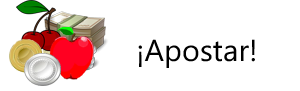
<style>
.page{position:relative;width:300px;height:91px;background:#ffffff}
.page>*{position:absolute;margin:0}
.t1{font:30.3px "SegoeUI";color:#000000}
</style>
<div class="page">
<p class="t1" style="left:138px;top:39px;width:117px;height:29px">¡Apostar!</p>
</div>
